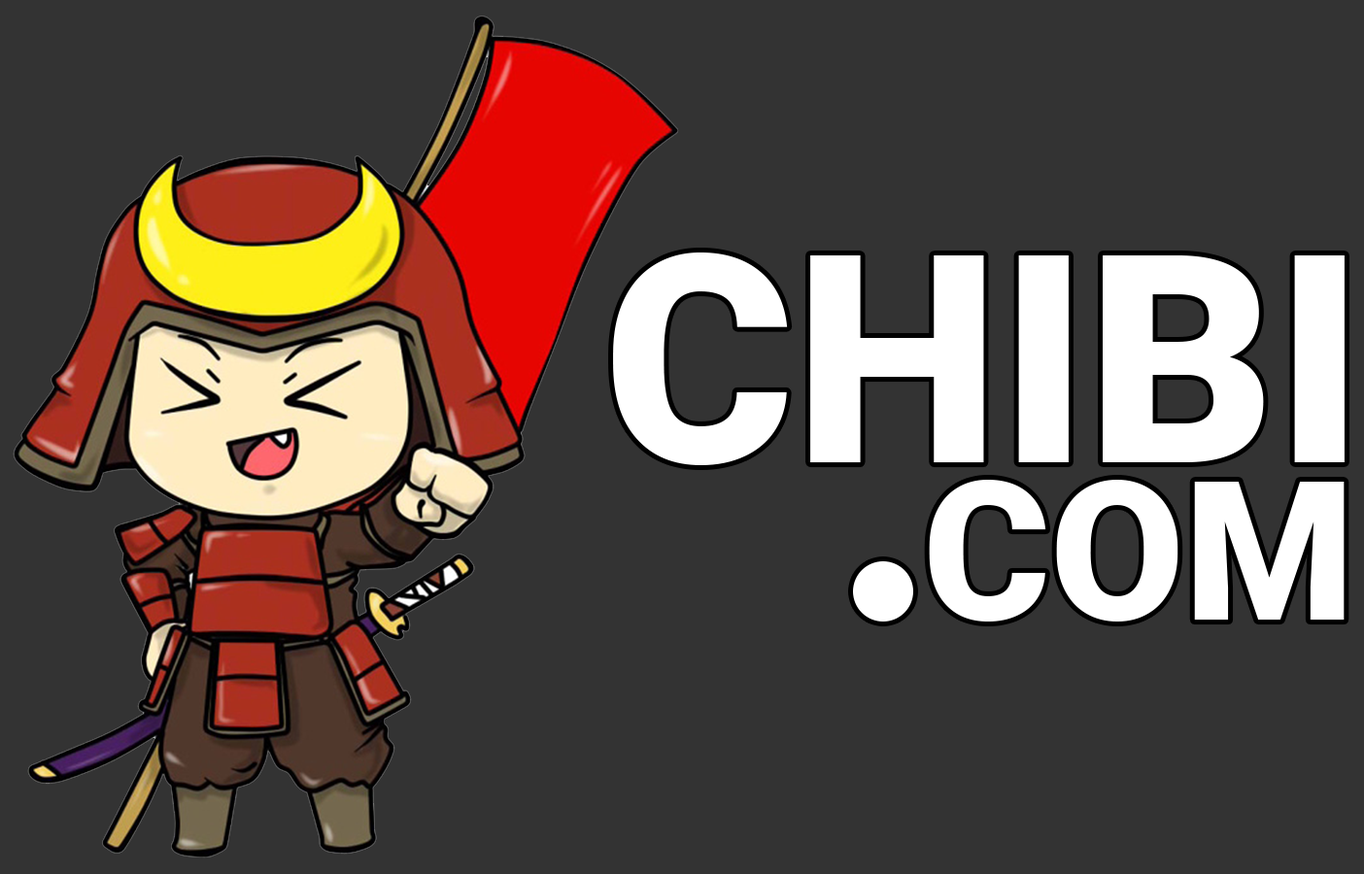
<style>
.page{position:relative;width:1364px;height:874px;background:#333333}
.page>*{position:absolute;margin:0}
.t1{font:291.4px "Roboto-Black";color:#ffffff}
.t2{font:194.3px "Roboto-Black";color:#ffffff}
</style>
<div class="page">
<p class="t1" style="left:613px;top:253px;width:731px;height:212px">CHIBI</p>
<p class="t2" style="left:929px;top:480px;width:415px;height:142px">COM</p>
</div>
